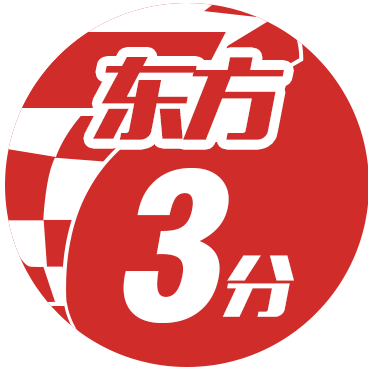
<style>
.page{position:relative;width:368px;height:368px;background:#d02c2a}
.page>*{position:absolute;margin:0}
.t1{font:87.4px "MFLiHei_Noncommercial-Regular";letter-spacing:-0.075em;color:#d02c2a;font-style:italic;scale:1.09 1}
.t2{font:197.6px "Swiss721BT-BlackCondensed";letter-spacing:-0.075em;color:#ffffff;font-style:italic;scale:1.05 1}
.t3{font:64.8px "MFLiHei_Noncommercial-Regular";letter-spacing:-0.075em;color:#ffffff;font-style:italic;scale:1.09 1}
</style>
<div class="page">
<p class="t1" style="left:93px;top:56px;width:191px;height:84px">东方</p>
<p class="t2" style="left:123px;top:168px;width:106px;height:155px">3</p>
<p class="t3" style="left:222px;top:255px;width:72px;height:62px">分</p>
</div>
